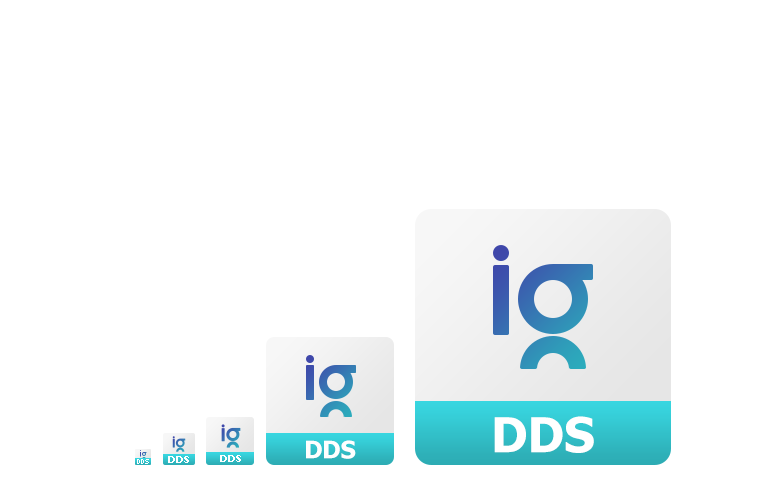
<style>
.page{position:relative;width:768px;height:480px;background:#ffffff}
.page>*{position:absolute;margin:0}
.t1{font:48px "Tahoma-Bold";color:#ffffff}
.t2{font:24px "Tahoma-Bold";color:#ffffff}
.t3{font:10px "Tahoma-Bold";color:#ffffff}
</style>
<div class="page">
<p class="t1" style="left:494px;top:416px;width:100px;height:37px">DDS</p>
<p class="t2" style="left:306px;top:440px;width:50px;height:19px">DDS</p>
<p class="t3" style="left:168px;top:456px;width:21px;height:7px">DDS</p>
<p class="t3" style="left:220px;top:455px;width:21px;height:7px">DDS</p>
</div>
